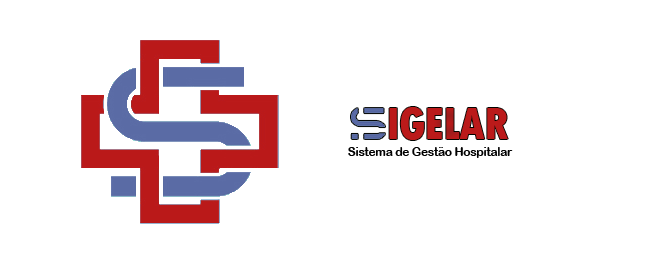
<style>
.page{position:relative;width:660px;height:260px;background:#ffffff}
.page>*{position:absolute;margin:0}
.t1{font:48px "TwCenMT-CondensedExtraBold";letter-spacing:-0.026em;color:#bb1a1a}
.t2{font:12px "ArialRoundedMTBold";letter-spacing:-0.026em;color:#010101}
</style>
<div class="page">
<p class="t1" style="left:389px;top:107px;width:119px;height:33px">IGELAR</p>
<p class="t2" style="left:348px;top:147px;width:165px;height:11px">Sistema de Gestão Hospitalar</p>
</div>
